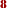
<style>
.page{position:relative;width:7px;height:8px;background:#9a0101}
.page>*{position:absolute;margin:0}
.t1{font:12px "Stencil";color:#9a0101}
</style>
<div class="page">
<p class="t1" style="left:0px;top:0px;width:7px;height:8px">8</p>
</div>
